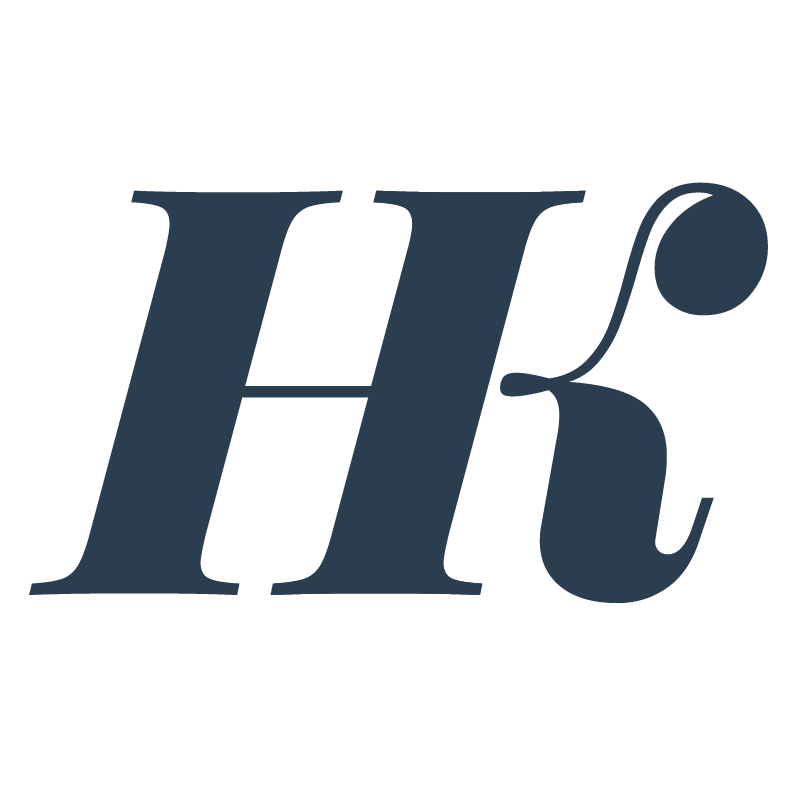
<style>
.page{position:relative;width:800px;height:800px;background:#ffffff}
.page>*{position:absolute;margin:0}
.t1{font:571px "PlayfairDisplay-BlackItalic";color:#2b3e50}
</style>
<div class="page">
<p class="t1" style="left:29px;top:182px;width:739px;height:421px">HK</p>
</div>
